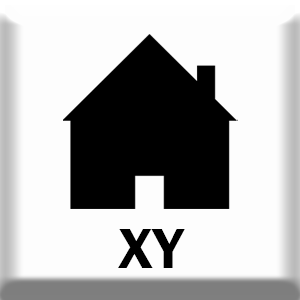
<style>
.page{position:relative;width:300px;height:300px;background:#fdfdfd}
.page>*{position:absolute;margin:0}
.t1{font:58.3px "FranklinGothic-Demi";color:#000000}
</style>
<div class="page">
<p class="t1" style="left:118px;top:229px;width:67px;height:39px">XY</p>
</div>
